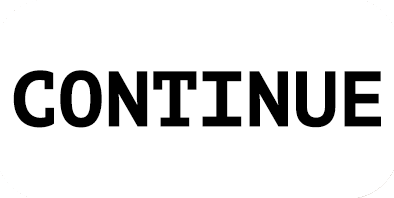
<style>
.page{position:relative;width:394px;height:198px;background:#ffffff}
.page>*{position:absolute;margin:0}
.t1{font:78.2px "PTMono-Bold";color:#000000}
</style>
<div class="page">
<p class="t1" style="left:13px;top:70px;width:368px;height:58px">CONTINUE</p>
</div>
